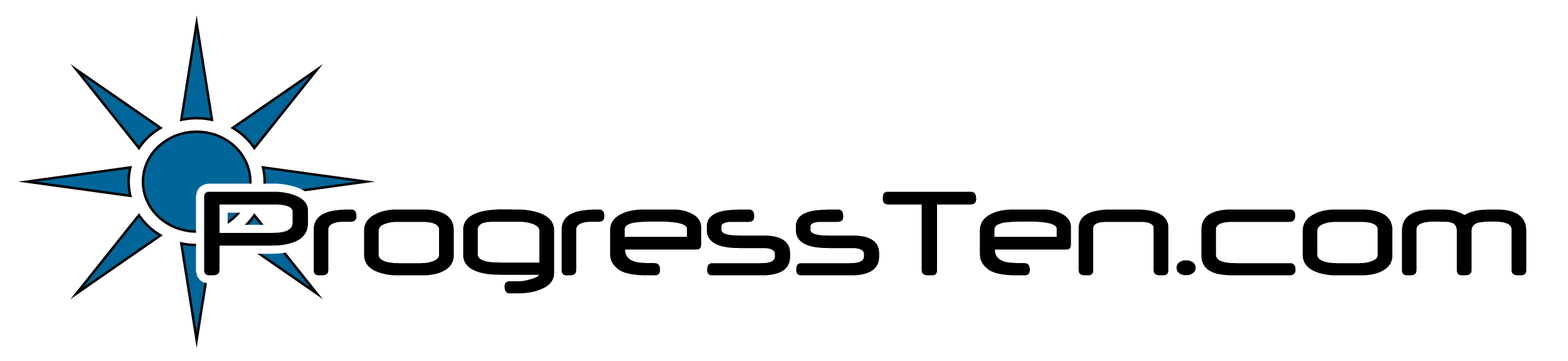
<style>
.page{position:relative;width:1568px;height:361px;background:#ffffff}
.page>*{position:absolute;margin:0}
.t1{font:140.2px "Neuropol";color:#000000}
</style>
<div class="page">
<p class="t1" style="left:204px;top:191px;width:1323px;height:103px">ProgressTen.com</p>
</div>
